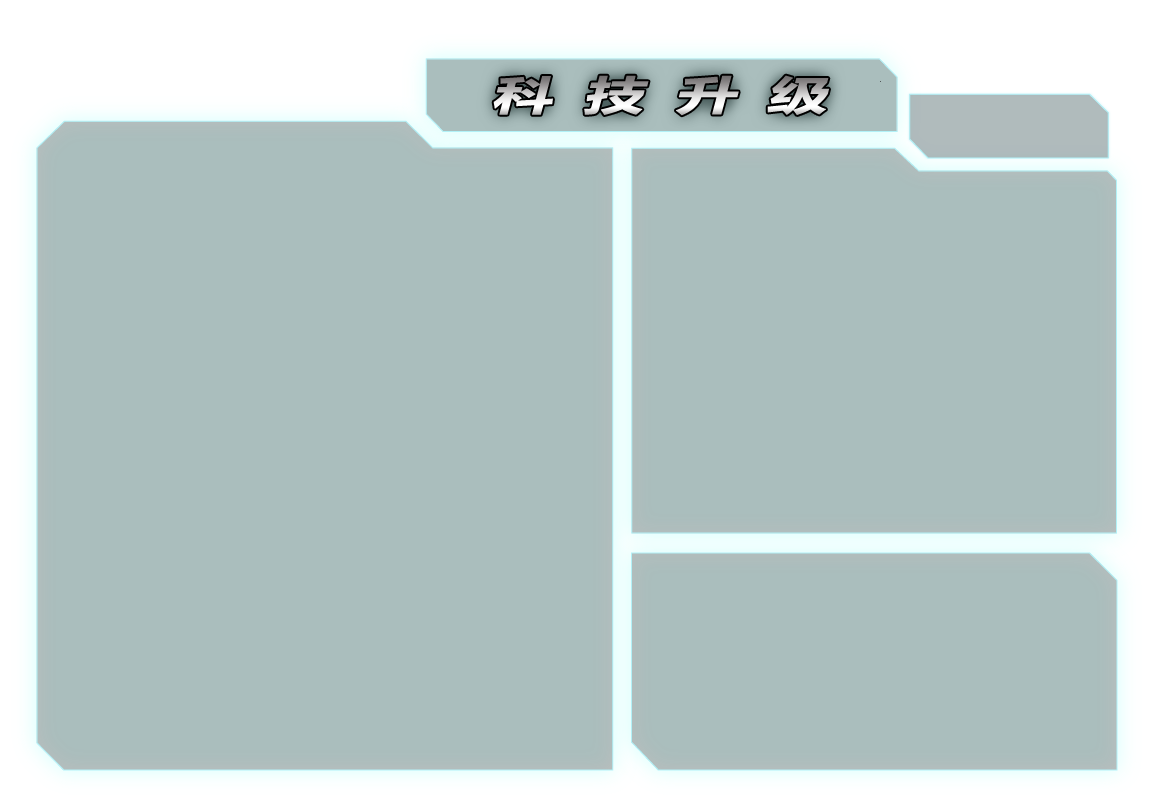
<style>
.page{position:relative;width:1152px;height:800px;background:#aabebd}
.page>*{position:absolute;margin:0}
.t1{font:40px "MicrosoftYaHei-Bold";letter-spacing:0.5em;font-weight:bold;font-style:italic;scale:1.5 1}
</style>
<div class="page">
<p class="t1" style="left:493px;top:75px;width:336px;height:41px">科技升级</p>
</div>
